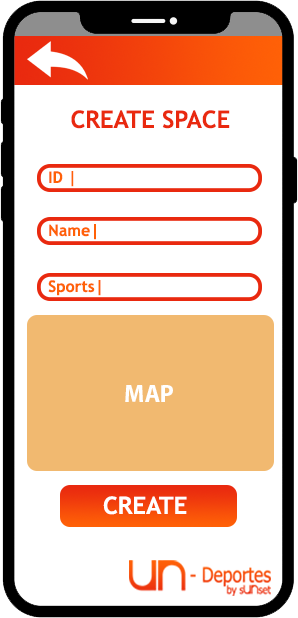
<style>
.page{position:relative;width:298px;height:618px;background:#ffffff}
.page>*{position:absolute;margin:0}
.t1{font:24px "TrebuchetMS-Bold";color:#e9290f}
.t2{font:16px "TrebuchetMS-Bold";color:#ff6107}
.t3{font:24px "MyriadPro-Bold";color:#ffffff}
.t4{font:24px "TrebuchetMS-Bold";color:#ffffff}
</style>
<div class="page">
<p class="t1" style="left:71px;top:110px;width:159px;height:19px">CREATE SPACE</p>
<p class="t2" style="left:49px;top:171px;width:25px;height:16px">ID |</p>
<p class="t2" style="left:49px;top:224px;width:47px;height:16px">Name|</p>
<p class="t2" style="left:48px;top:280px;width:53px;height:16px">Sports|</p>
<p class="t3" style="left:125px;top:385px;width:48px;height:17px">MAP</p>
<p class="t4" style="left:103px;top:496px;width:84px;height:19px">CREATE</p>
</div>
